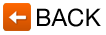
<style>
.page{position:relative;width:106px;height:35px;background:#ffffff}
.page>*{position:absolute;margin:0}
.t1{font:24px "HelveticaNeue";color:#000000}
</style>
<div class="page">
<p class="t1" style="left:37px;top:8px;width:64px;height:19px">BACK</p>
</div>
